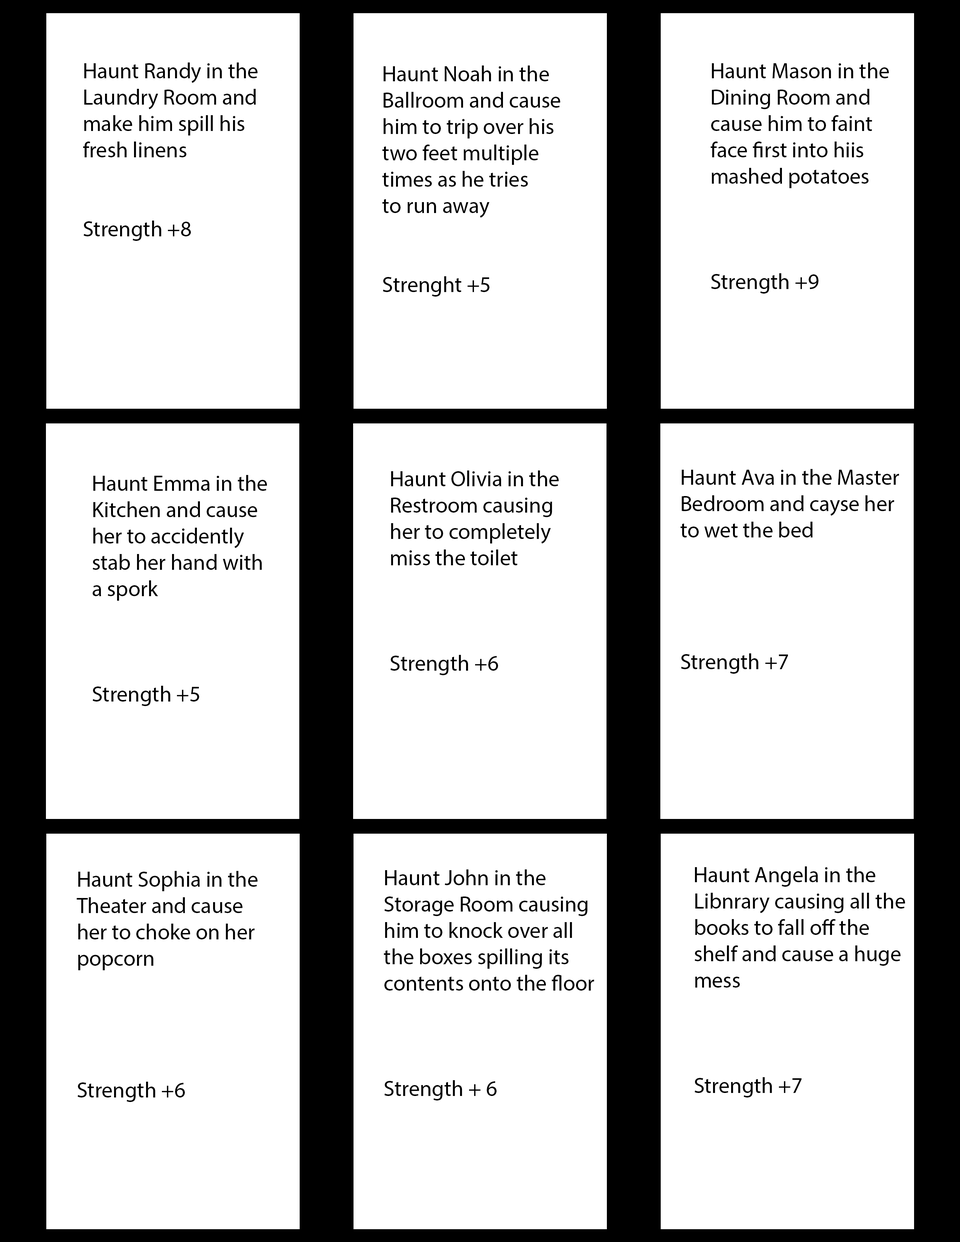
<style>
.page{position:relative;width:960px;height:1242px;background:#ffffff}
.page>*{position:absolute;margin:0}
.t1{font:22px "MyriadPro-Regular";color:#000000}
</style>
<div class="page">
<p class="t1" style="left:83px;top:62px;width:174px;height:179px">Haunt Randy in the<br>Laundry Room and<br>make him spill his  <br>fresh linens<br><br><br>Strength +8</p>
<p class="t1" style="left:382px;top:65px;width:178px;height:232px">Haunt Noah in the<br>Ballroom and cause<br>him to trip over his <br>two feet multiple<br>times as he tries<br>to run away<br><br><br>Strenght +5</p>
<p class="t1" style="left:710px;top:62px;width:179px;height:232px">Haunt Mason in the<br>Dining Room and<br>cause him to faint<br>face first into hiis<br>mashed potatoes<br><br><br><br>Strength +9</p>
<p class="t1" style="left:390px;top:471px;width:169px;height:204px">Haunt Olivia in the <br>Restroom causing <br>her to completely <br>miss the toilet<br><br><br><br>Strength +6</p>
<p class="t1" style="left:680px;top:469px;width:219px;height:205px">Haunt Ava in the Master<br>Bedroom and cayse her <br>to wet the bed<br><br><br><br><br>Strength +7</p>
<p class="t1" style="left:93px;top:475px;width:174px;height:231px">Haunt Emma in the<br>Kitchen and cause <br>her to accidently<br>stab her hand with<br>a spork <br><br><br><br>Strength +5</p>
<p class="t1" style="left:384px;top:870px;width:210px;height:231px">Haunt John in the <br>Storage Room causing<br>him to knock over all<br>the boxes spilling its <br>contents onto the floor<br><br><br><br>Strength + 6</p>
<p class="t1" style="left:695px;top:867px;width:210px;height:231px">Haunt Angela in the <br>Libnrary causing all the<br>books to fall off the <br>shelf and cause a huge <br>mess<br><br><br><br>Strength +7</p>
<p class="t1" style="left:76px;top:871px;width:181px;height:231px">Haunt Sophia in the<br>Theater and cause<br>her to choke on her <br>popcorn<br><br><br><br><br>Strength +6</p>
</div>
